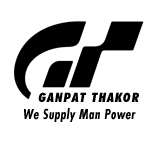
<style>
.page{position:relative;width:160px;height:144px;background:#ffffff}
.page>*{position:absolute;margin:0}
.t1{font:13px "FuturaBT-ExtraBlackCondItalic";letter-spacing:0.09em;color:#000000}
.t2{font:15px "FuturaPTCond-BoldObl";letter-spacing:0.01em;color:#000000}
</style>
<div class="page">
<p class="t1" style="left:38px;top:92px;width:101px;height:10px">GANPAT THAKOR</p>
<p class="t2" style="left:23px;top:108px;width:113px;height:14px">We Supply Man Power</p>
</div>
